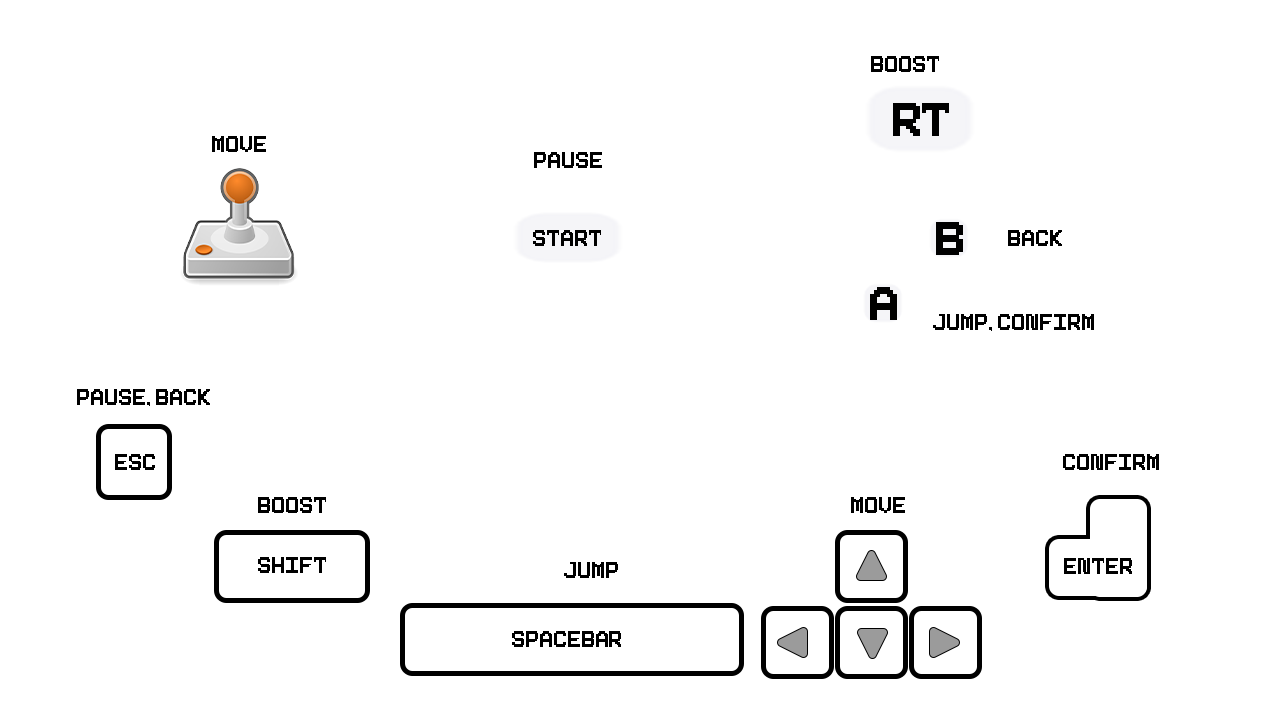
<style>
.page{position:relative;width:1280px;height:720px;background:#ffffff}
.page>*{position:absolute;margin:0}
.t1{font:31.1px "Pixeboy";letter-spacing:-0.02em;color:#000000}
.t2{font:65.6px "Pixeboy";letter-spacing:-0.02em;color:#000000}
</style>
<div class="page">
<p class="t1" style="left:871px;top:56px;width:68px;height:16px">boost</p>
<p class="t2" style="left:893px;top:103px;width:56px;height:33px">rt</p>
<p class="t1" style="left:212px;top:136px;width:54px;height:16px">move</p>
<p class="t1" style="left:534px;top:152px;width:68px;height:16px">pause</p>
<p class="t2" style="left:936px;top:222px;width:27px;height:33px">b</p>
<p class="t1" style="left:533px;top:230px;width:68px;height:16px">start</p>
<p class="t1" style="left:1008px;top:230px;width:54px;height:16px">back</p>
<p class="t2" style="left:870px;top:287px;width:27px;height:33px">a</p>
<p class="t1" style="left:933px;top:314px;width:161px;height:17px">jump, confirm</p>
<p class="t1" style="left:77px;top:389px;width:133px;height:17px">pause, back</p>
<p class="t1" style="left:115px;top:454px;width:40px;height:16px">esc</p>
<p class="t1" style="left:1063px;top:454px;width:96px;height:16px">confirm</p>
<p class="t1" style="left:258px;top:497px;width:68px;height:16px">boost</p>
<p class="t1" style="left:851px;top:497px;width:54px;height:16px">move</p>
<p class="t1" style="left:258px;top:557px;width:68px;height:16px">shift</p>
<p class="t1" style="left:1064px;top:558px;width:68px;height:16px">enter</p>
<p class="t1" style="left:564px;top:562px;width:54px;height:16px">jump</p>
<p class="t1" style="left:512px;top:631px;width:109px;height:16px">spacebar</p>
</div>
